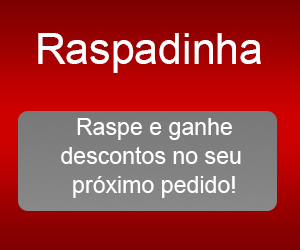
<style>
.page{position:relative;width:300px;height:250px}
.page>*{position:absolute;margin:0}
.t1{font:42.8px "ArialMT";color:#ffffff}
.t2{font:24.3px "ArialMT";color:#ffffff;scale:0.95 1}
</style>
<div class="page">
<p class="t1" style="left:38px;top:33px;width:223px;height:40px">Raspadinha</p>
<p class="t2" style="left:61px;top:118px;width:180px;height:80px;text-align:center">Raspe e ganhe<br>descontos no seu <br>próximo pedido!</p>
</div>
